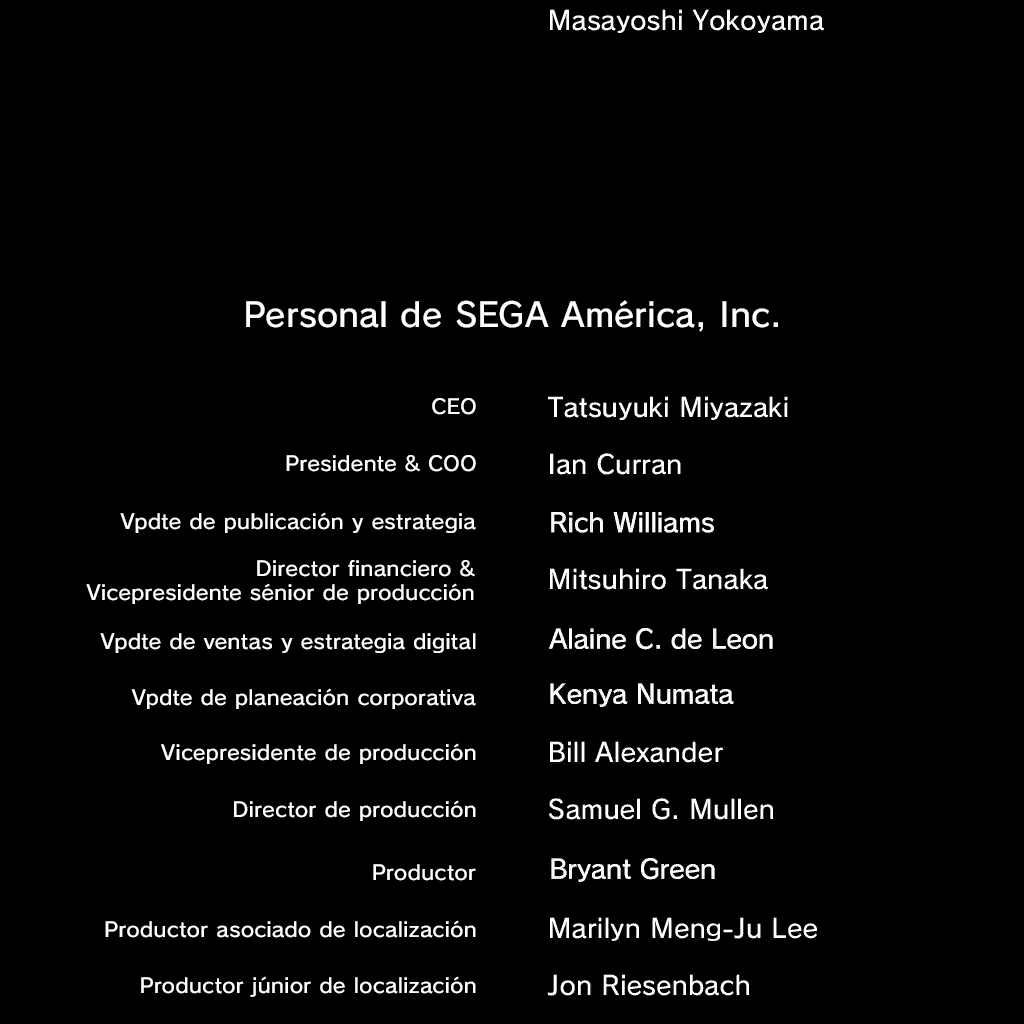
<style>
.page{position:relative;width:1024px;height:1024px;background:#000000}
.page>*{position:absolute;margin:0}
.t1{font:32.9px "SCEPS3RodinLATIN-Regular";letter-spacing:0.015em;color:#ffffff}
.t2{font:20.1px "SCEPS3RodinLATIN-Regular";letter-spacing:0.015em;color:#ffffff;scale:1.06 1}
</style>
<div class="page">
<p class="t1" style="left:246px;top:300px;width:532px;height:32px">Personal de SEGA América, Inc.</p>
<p class="t2" style="left:432px;top:398px;width:44px;height:17px">CEO</p>
<p class="t2" style="left:286px;top:455px;width:190px;height:17px">Presidente &amp; COO</p>
<p class="t2" style="left:120px;top:512px;width:356px;height:21px">Vpdte de publicación y estrategia</p>
<p class="t2" style="left:86px;top:560px;width:389px;height:44px;text-align:right">Director financiero &amp;<br>Vicepresidente sénior de producción</p>
<p class="t2" style="left:100px;top:633px;width:376px;height:20px">Vpdte de ventas y estrategia digital</p>
<p class="t2" style="left:131px;top:688px;width:345px;height:21px">Vpdte de planeación corporativa</p>
<p class="t2" style="left:161px;top:743px;width:315px;height:21px">Vicepresidente de producción</p>
<p class="t2" style="left:234px;top:800px;width:242px;height:21px">Director de producción</p>
<p class="t2" style="left:373px;top:864px;width:103px;height:17px">Productor</p>
<p class="t2" style="left:105px;top:920px;width:371px;height:18px">Productor asociado de localización</p>
<p class="t2" style="left:141px;top:976px;width:335px;height:21px">Productor júnior de localización</p>
</div>
